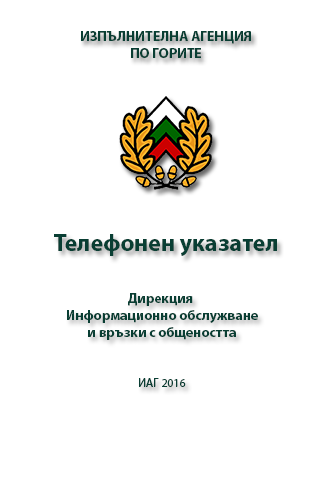
<style>
.page{position:relative;width:320px;height:480px;background:#ffffff}
.page>*{position:absolute;margin:0}
.t1{font:14px "MyriadPro-Bold";color:#093e33}
.t2{font:24px "MyriadPro-Bold";color:#093e33}
.t3{font:12px "MyriadPro-Regular";color:#093e33}
</style>
<div class="page">
<p class="t1" style="left:81px;top:31px;width:170px;height:27px;text-align:center">ИЗПЪЛНИТЕЛНА АГЕНЦИЯ<br>ПО ГОРИТЕ</p>
<p class="t2" style="left:54px;top:234px;width:223px;height:22px">Телефонен указател</p>
<p class="t1" style="left:67px;top:293px;width:191px;height:47px;text-align:center">Дирекция <br>Информационно обслужване<br>и връзки с общеността</p>
<p class="t3" style="left:139px;top:378px;width:47px;height:9px">ИАГ 2016</p>
</div>
